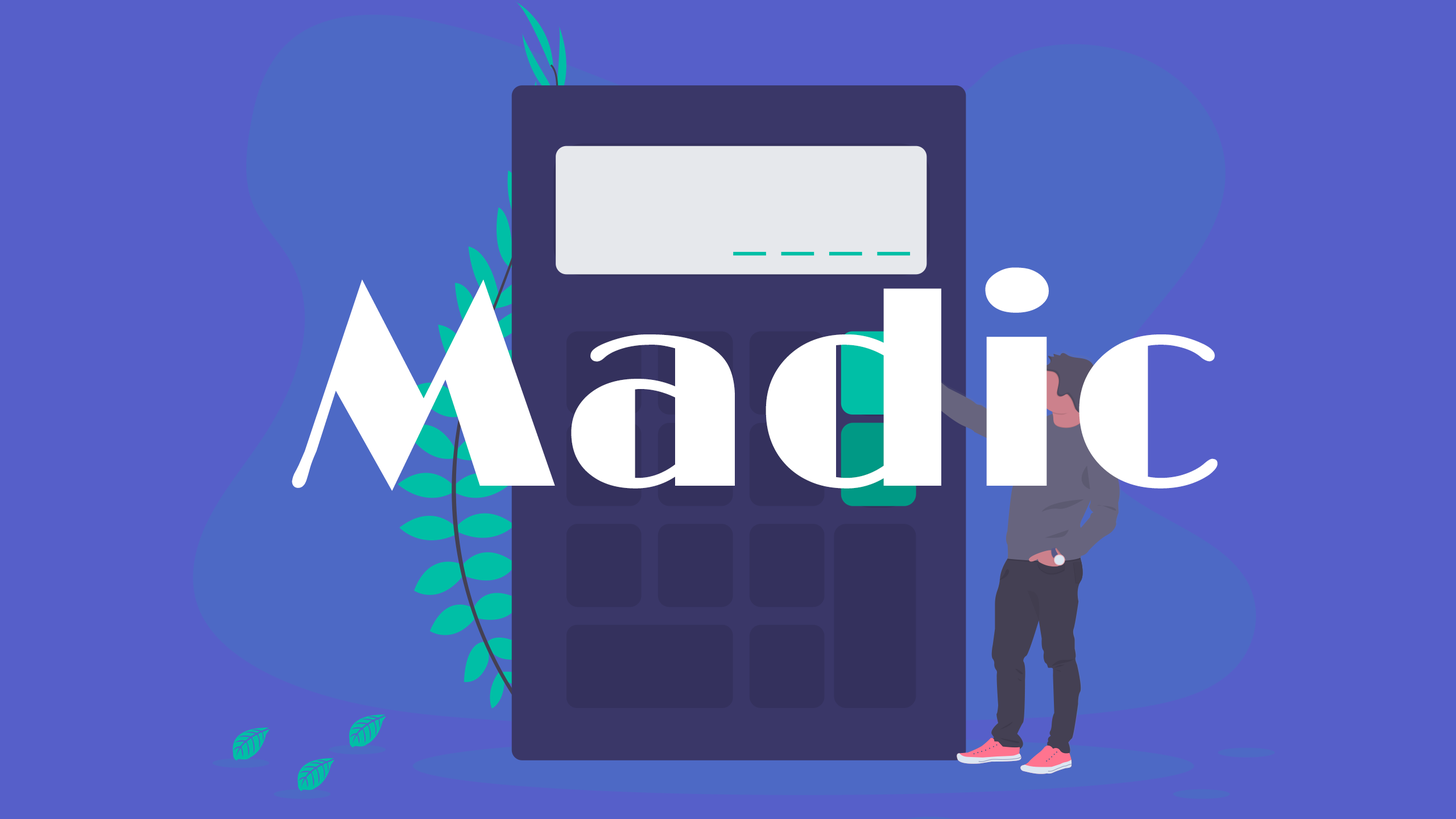
<style>
.page{position:relative;width:1456px;height:819px;background:#565fc9}
.page>*{position:absolute;margin:0}
.t1{font:285.1px "Limelight-Regular";color:#ffffff}
</style>
<div class="page">
<p class="t1" style="left:292px;top:267px;width:926px;height:224px">Madic</p>
</div>
